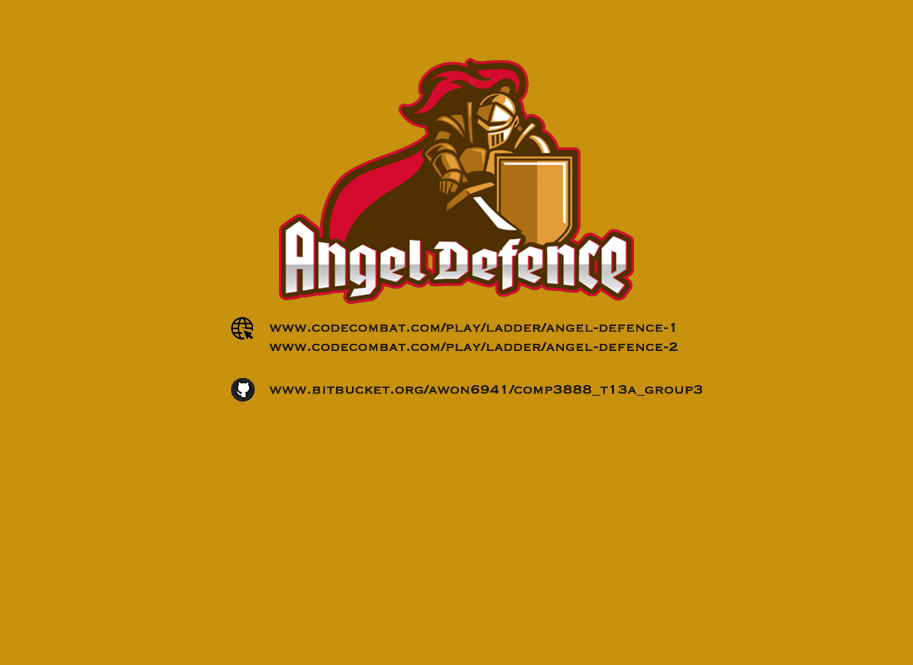
<style>
.page{position:relative;width:913px;height:665px;background:#c9920e}
.page>*{position:absolute;margin:0}
.t1{font:16px "Copperplate";color:#1f1a0d}
</style>
<div class="page">
<p class="t1" style="left:269px;top:323px;width:409px;height:29px">www.codecombat.com/play/ladder/angel-defence-1<br>www.codecombat.com/play/ladder/angel-defence-2</p>
<p class="t1" style="left:269px;top:385px;width:434px;height:11px">www.bitbucket.org/awon6941/comp3888_t13a_group3</p>
</div>
